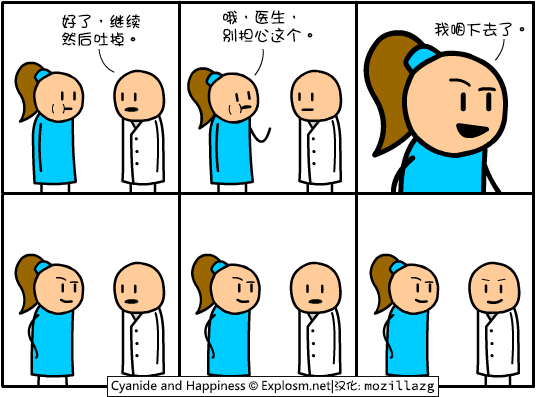
<style>
.page{position:relative;width:536px;height:397px;background:#ffffff}
.page>*{position:absolute;margin:0}
.t1{font:16px/18px "DFGirl";color:#000000}
.t2{font:16px "DFGirl";color:#000000}
</style>
<div class="page">
<p class="t1" style="left:61px;top:14px;width:79px;height:33px">好了，继续<br>然后吐掉。</p>
<p class="t1" style="left:223px;top:10px;width:90px;height:33px">哦，医生，<br>别担心这个。</p>
<p class="t2" style="left:434px;top:22px;width:91px;height:15px">我咽下去了。</p>
</div>
